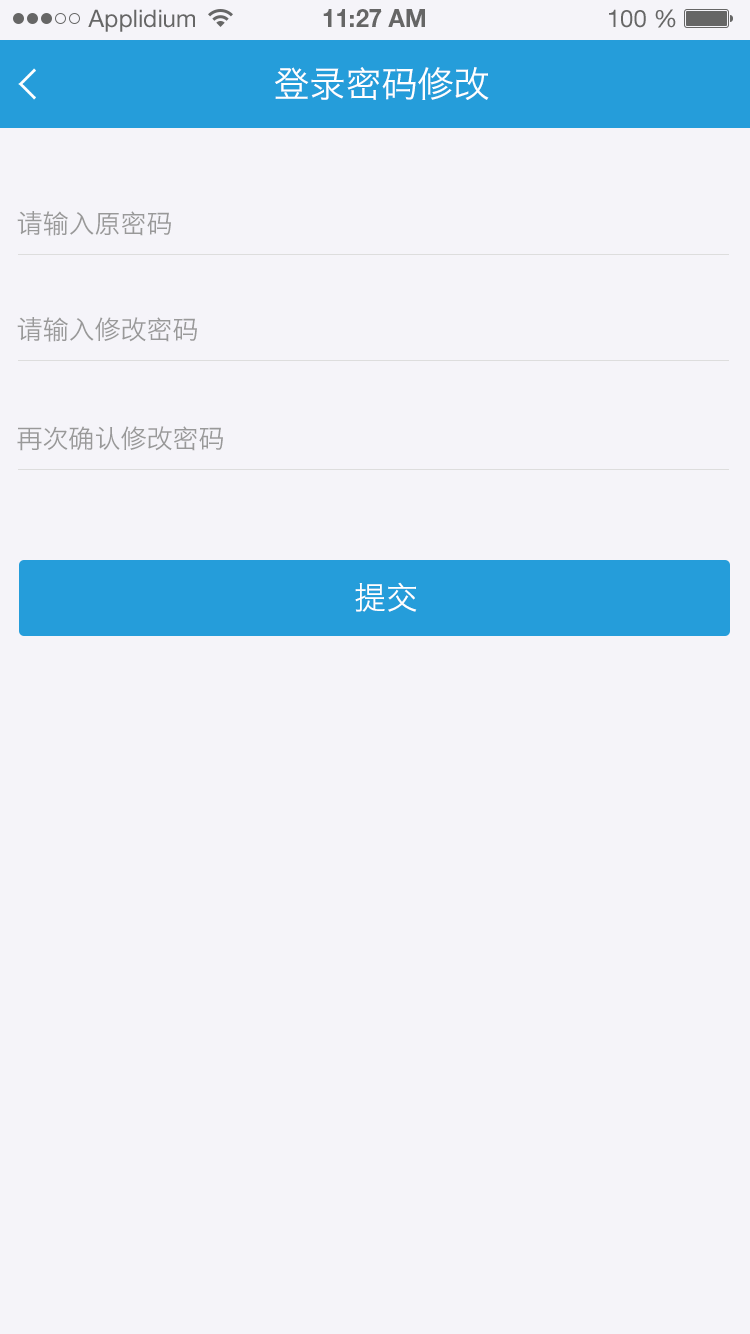
<style>
.page{position:relative;width:750px;height:1334px;background:#f5f4f9}
.page>*{position:absolute;margin:0}
.t1{font:24px "HelveticaNeueLTStd-Roman";color:#666666}
.t2{font:24px "HelveticaNeueLTStd-Bd";color:#666666}
.t3{font:36px "HiraginoSansGB-W3";color:#ffffff;text-transform:uppercase}
.t4{font:26px "HiraginoSansGB-W3";color:#999999;text-transform:uppercase}
.t5{font:32px "HiraginoSansGB-W3";color:#ffffff;text-transform:uppercase}
</style>
<div class="page">
<p class="t1" style="left:88px;top:9px;width:107px;height:23px">Applidium</p>
<p class="t2" style="left:323px;top:9px;width:102px;height:18px">11:27 AM</p>
<p class="t1" style="left:609px;top:9px;width:67px;height:19px">100 %</p>
<p class="t3" style="left:275px;top:67px;width:214px;height:33px">登录密码修改</p>
<p class="t4" style="left:17px;top:211px;width:154px;height:25px">请输入原密码</p>
<p class="t4" style="left:17px;top:317px;width:180px;height:25px">请输入修改密码</p>
<p class="t4" style="left:17px;top:426px;width:206px;height:25px">再次确认修改密码</p>
<p class="t5" style="left:355px;top:582px;width:62px;height:30px">提交</p>
</div>
